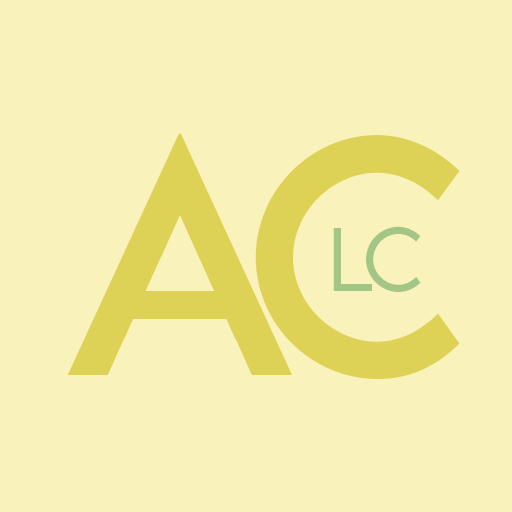
<style>
.page{position:relative;width:512px;height:512px;background:#faf2bb}
.page>*{position:absolute;margin:0}
.t1{font:300px "LEMONMILK-Regular";color:#ddd156}
.t2{font:80.5px "LEMONMILK-Light";color:#a3c586}
</style>
<div class="page">
<p class="t1" style="left:255px;top:135px;width:205px;height:245px">C</p>
<p class="t2" style="left:333px;top:228px;width:39px;height:63px">l</p>
<p class="t2" style="left:366px;top:226px;width:55px;height:66px">c</p>
</div>
